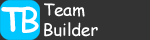
<style>
.page{position:relative;width:150px;height:40px;background:#333333}
.page>*{position:absolute;margin:0}
.t1{font:33.3px "ComicSansMS";color:#ffffff}
.t2{font:16.7px "ComicSansMS";color:#ffffff}
.t3{font:33.3px "ComicSansMS-Bold";color:#ffffff}
</style>
<div class="page">
<p class="t1" style="left:22px;top:6px;width:17px;height:27px">B</p>
<p class="t2" style="left:44px;top:3px;width:54px;height:34px">Team <br>Builder</p>
<p class="t3" style="left:1px;top:7px;width:24px;height:25px">T</p>
</div>
